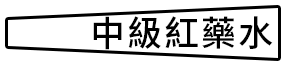
<style>
.page{position:relative;width:286px;height:66px;background:#ffffff}
.page>*{position:absolute;margin:0}
.t1{font:35px "NotoSansCJKtc-Medium";letter-spacing:0.06em;color:#000000}
</style>
<div class="page">
<p class="t1" style="left:93px;top:16px;width:180px;height:34px">中級紅藥水</p>
</div>
